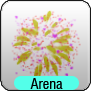
<style>
.page{position:relative;width:92px;height:92px}
.page>*{position:absolute;margin:0}
.t1{font:14.7px "Swiss721BT-RomanCondensed";color:#000000}
</style>
<div class="page">
<p class="t1" style="left:30px;top:78px;width:33px;height:11px">Arena</p>
</div>
